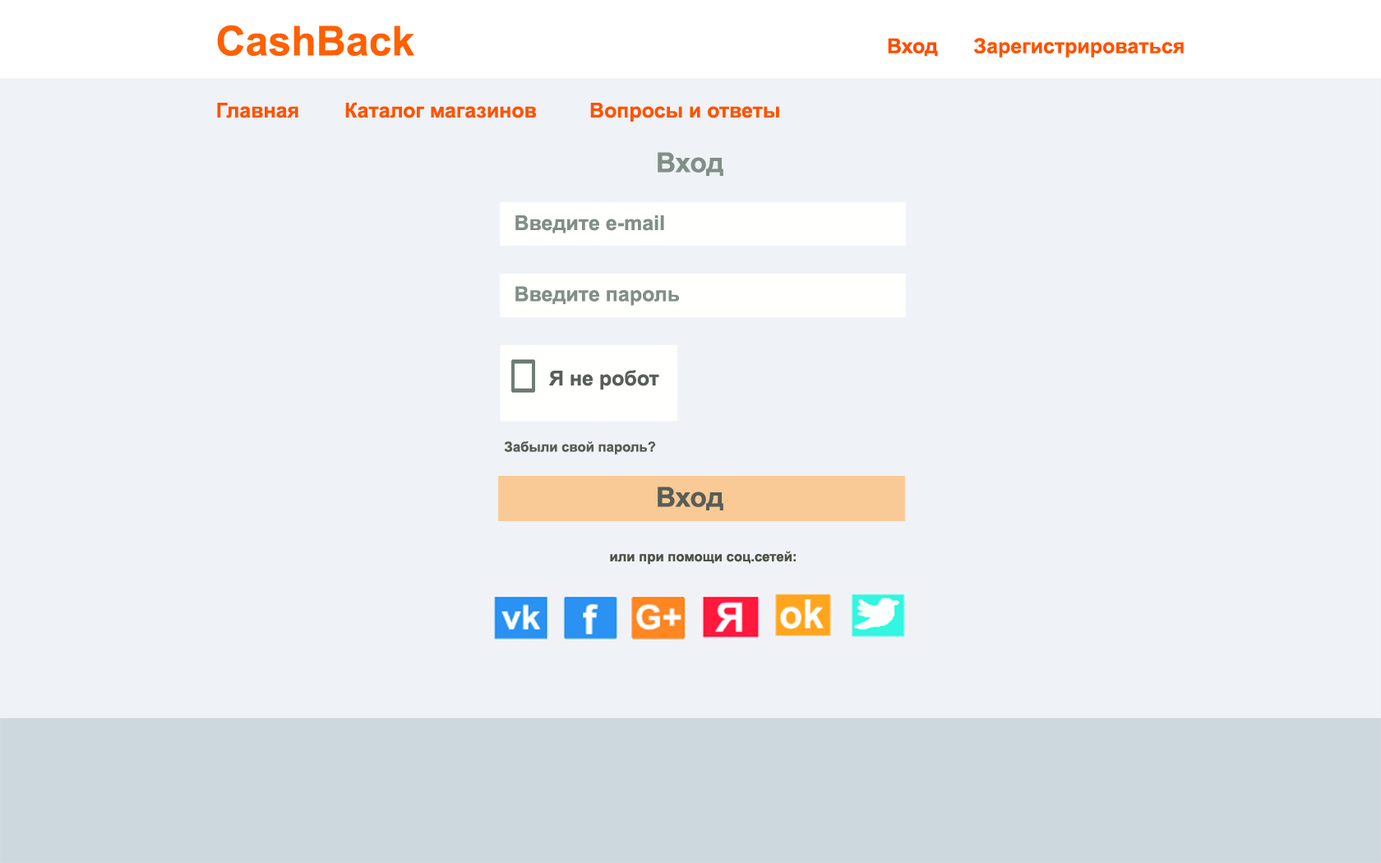
<style>
.page{position:relative;width:1381px;height:863px;background:#eff2f6}
.page>*{position:absolute;margin:0}
.t1{font:41.1px "Arial-BoldMT";color:#ff6000}
.t2{font:20.6px "Arial-BoldMT";color:#ff4c00}
.t3{font:20.6px "Arial-BoldMT";color:#ff5200}
.t4{font:27.4px "Arial-BoldMT";color:#818e86}
.t5{font:20.6px "Arial-BoldMT";color:#818e86}
.t6{font:20.6px "Arial-BoldMT";color:#595e57}
.t7{font:13.7px "Arial-BoldMT";color:#595e57}
.t8{font:27.4px "Arial-BoldMT";color:#595e57}
.t9{font:13.7px "Arial-BoldMT";color:#4f5347}
</style>
<div class="page">
<p class="t1" style="left:217px;top:25px;width:197px;height:31px">CashBack</p>
<p class="t2" style="left:888px;top:38px;width:50px;height:19px">Вход</p>
<p class="t3" style="left:974px;top:38px;width:210px;height:20px">Зарегистрироваться</p>
<p class="t3" style="left:345px;top:102px;width:192px;height:16px">Каталог магазинов</p>
<p class="t3" style="left:217px;top:103px;width:81px;height:15px">Главная</p>
<p class="t3" style="left:590px;top:103px;width:189px;height:19px">Вопросы и ответы</p>
<p class="t4" style="left:658px;top:152px;width:66px;height:24px">Вход</p>
<p class="t5" style="left:516px;top:215px;width:148px;height:18px">Введите e-mail</p>
<p class="t5" style="left:516px;top:286px;width:164px;height:20px">Введите пароль</p>
<p class="t6" style="left:549px;top:370px;width:110px;height:20px">Я не робот</p>
<p class="t7" style="left:504px;top:442px;width:152px;height:13px">Забыли свой пароль?</p>
<p class="t8" style="left:658px;top:487px;width:66px;height:24px">Вход</p>
<p class="t9" style="left:610px;top:551px;width:186px;height:14px">или при помощи соц.сетей:</p>
</div>
